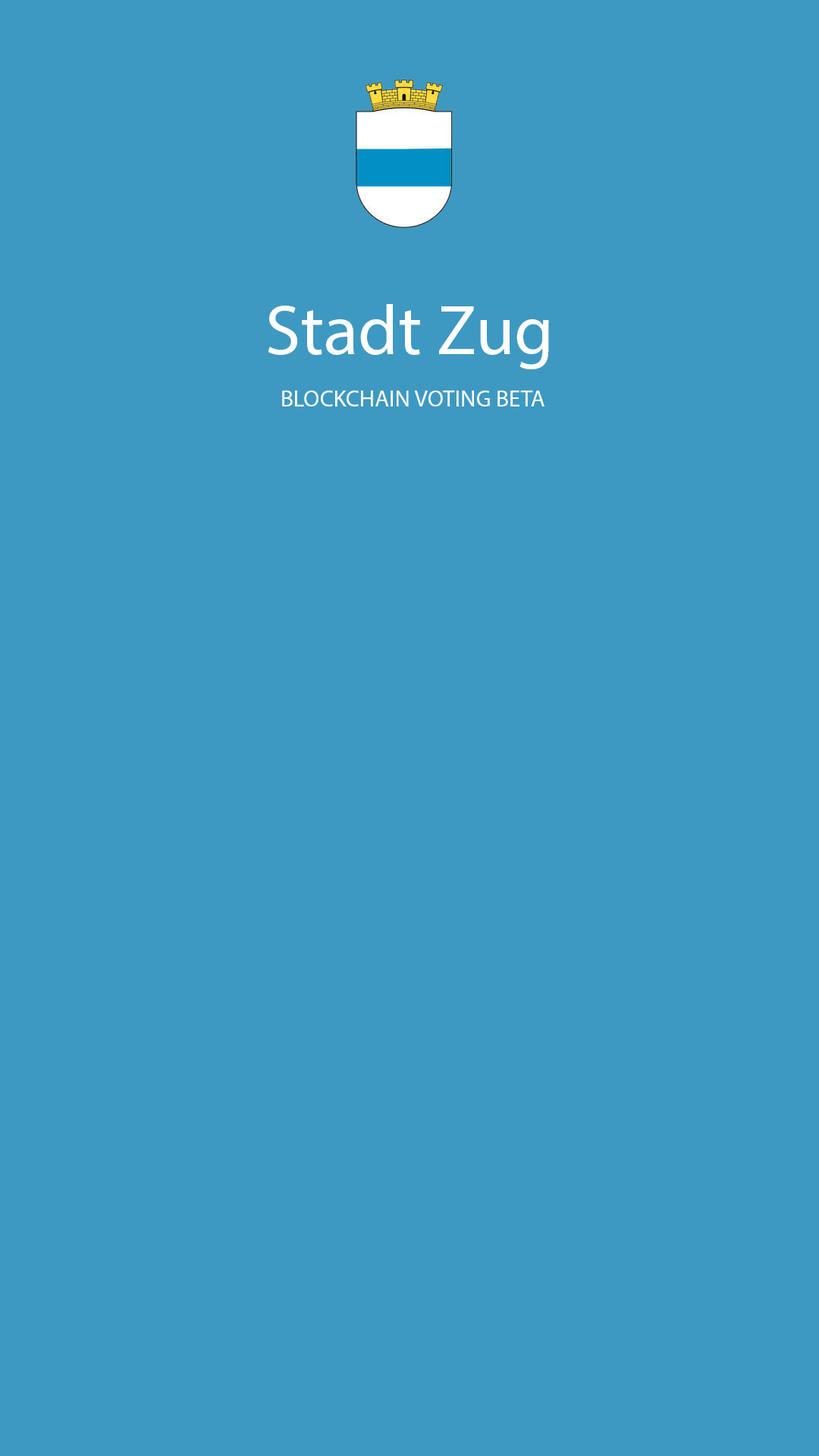
<style>
.page{position:relative;width:819px;height:1456px;background:#3d99c2}
.page>*{position:absolute;margin:0}
.t1{font:70.9px "MyriadPro-Regular";color:#ffffff}
.t2{font:23.5px "MyriadPro-Regular";color:#ffffff;text-transform:uppercase}
</style>
<div class="page">
<p class="t1" style="left:268px;top:304px;width:281px;height:65px">Stadt Zug</p>
<p class="t2" style="left:282px;top:391px;width:262px;height:15px">Blockchain Voting beta</p>
</div>
